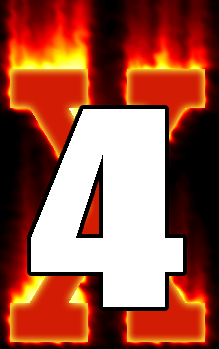
<style>
.page{position:relative;width:219px;height:349px;background:#ffffff}
.page>*{position:absolute;margin:0}
.t1{font:250px "Impact";letter-spacing:0.025em;color:#ffffff;font-variant:small-caps;scale:1.25 1}
</style>
<div class="page">
<p class="t1" style="left:31px;top:109px;width:152px;height:198px">4</p>
</div>
